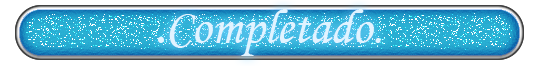
<style>
.page{position:relative;width:540px;height:66px;background:#ffffff}
.page>*{position:absolute;margin:0}
.t1{font:50px "MonotypeCorsiva";color:#e1f3ff}
.t2{font:50px "MyriadPro-Regular";color:#e1f3ff}
</style>
<div class="page">
<p class="t1" style="left:158px;top:9px;width:223px;height:47px"><span class="t2">.</span>Completado.</p>
</div>
